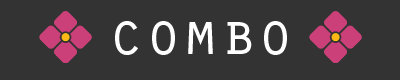
<style>
.page{position:relative;width:400px;height:80px;background:#333333}
.page>*{position:absolute;margin:0}
.t1{font:62px "OratorStd";color:#ffffff}
</style>
<div class="page">
<p class="t1" style="left:115px;top:21px;width:172px;height:34px">combo</p>
</div>
